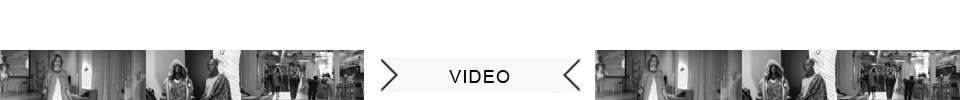
<style>
.page{position:relative;width:960px;height:100px;background:#ffffff}
.page>*{position:absolute;margin:0}
.t1{font:18.4px "ArialMT";letter-spacing:0.05em;color:#000000;text-transform:uppercase}
</style>
<div class="page">
<p class="t1" style="left:449px;top:70px;width:61px;height:13px">VIDEO</p>
</div>
